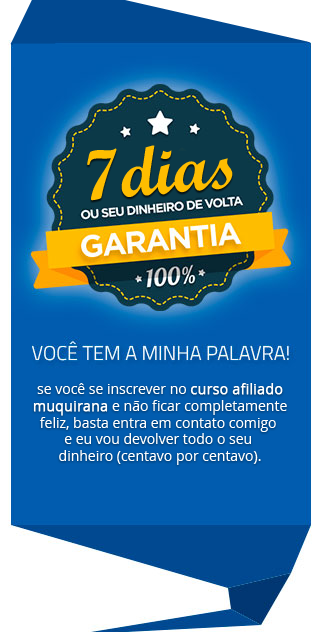
<style>
.page{position:relative;width:323px;height:632px;background:#015caf}
.page>*{position:absolute;margin:0}
.t1{font:70px "ScriptMTBold";color:#febd00}
.t2{font:14px "OpenSans";color:#ffffff}
.t3{font:14px "OpenSans";color:#ffffff;font-weight:bold}
</style>
<div class="page">
<p class="t1" style="left:87px;top:145px;width:146px;height:56px;rotate:-5deg">7dias</p>
<p class="t2" style="left:33px;top:383px;width:254px;height:82px;text-align:center">se você se inscrever no <span class="t3">curso afiliado<br>muquirana </span>e não ficar completamente<br>feliz, basta entra em contato comigo <br>e eu vou devolver todo o seu <br>dinheiro (centavo por centavo).</p>
</div>
